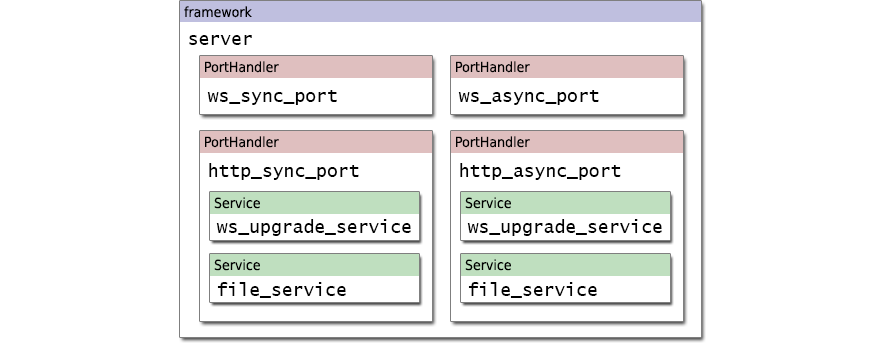
<style>
.page{position:relative;width:880px;height:344px;background:#ffffff}
.page>*{position:absolute;margin:0}
.t1{font:14px "DejaVuSansCondensed";color:#000000}
.t2{font:18px "LucidaConsole";color:#000000}
</style>
<div class="page">
<p class="t1" style="left:184px;top:6px;width:68px;height:12px">framework</p>
<p class="t2" style="left:189px;top:35px;width:63px;height:10px">server</p>
<p class="t1" style="left:205px;top:61px;width:74px;height:12px">PortHandler</p>
<p class="t1" style="left:456px;top:61px;width:74px;height:12px">PortHandler</p>
<p class="t2" style="left:207px;top:90px;width:130px;height:15px">ws_sync_port</p>
<p class="t2" style="left:458px;top:90px;width:141px;height:15px">ws_async_port</p>
<p class="t1" style="left:205px;top:136px;width:74px;height:12px">PortHandler</p>
<p class="t1" style="left:456px;top:136px;width:74px;height:12px">PortHandler</p>
<p class="t2" style="left:209px;top:163px;width:150px;height:17px">http_sync_port</p>
<p class="t2" style="left:460px;top:163px;width:161px;height:17px">http_async_port</p>
<p class="t1" style="left:214px;top:197px;width:46px;height:12px">Service</p>
<p class="t1" style="left:465px;top:197px;width:46px;height:12px">Service</p>
<p class="t2" style="left:216px;top:219px;width:195px;height:17px">ws_upgrade_service</p>
<p class="t2" style="left:467px;top:219px;width:195px;height:17px">ws_upgrade_service</p>
<p class="t1" style="left:214px;top:259px;width:46px;height:12px">Service</p>
<p class="t1" style="left:465px;top:259px;width:46px;height:12px">Service</p>
<p class="t2" style="left:217px;top:282px;width:129px;height:16px">file_service</p>
<p class="t2" style="left:468px;top:282px;width:129px;height:16px">file_service</p>
</div>
